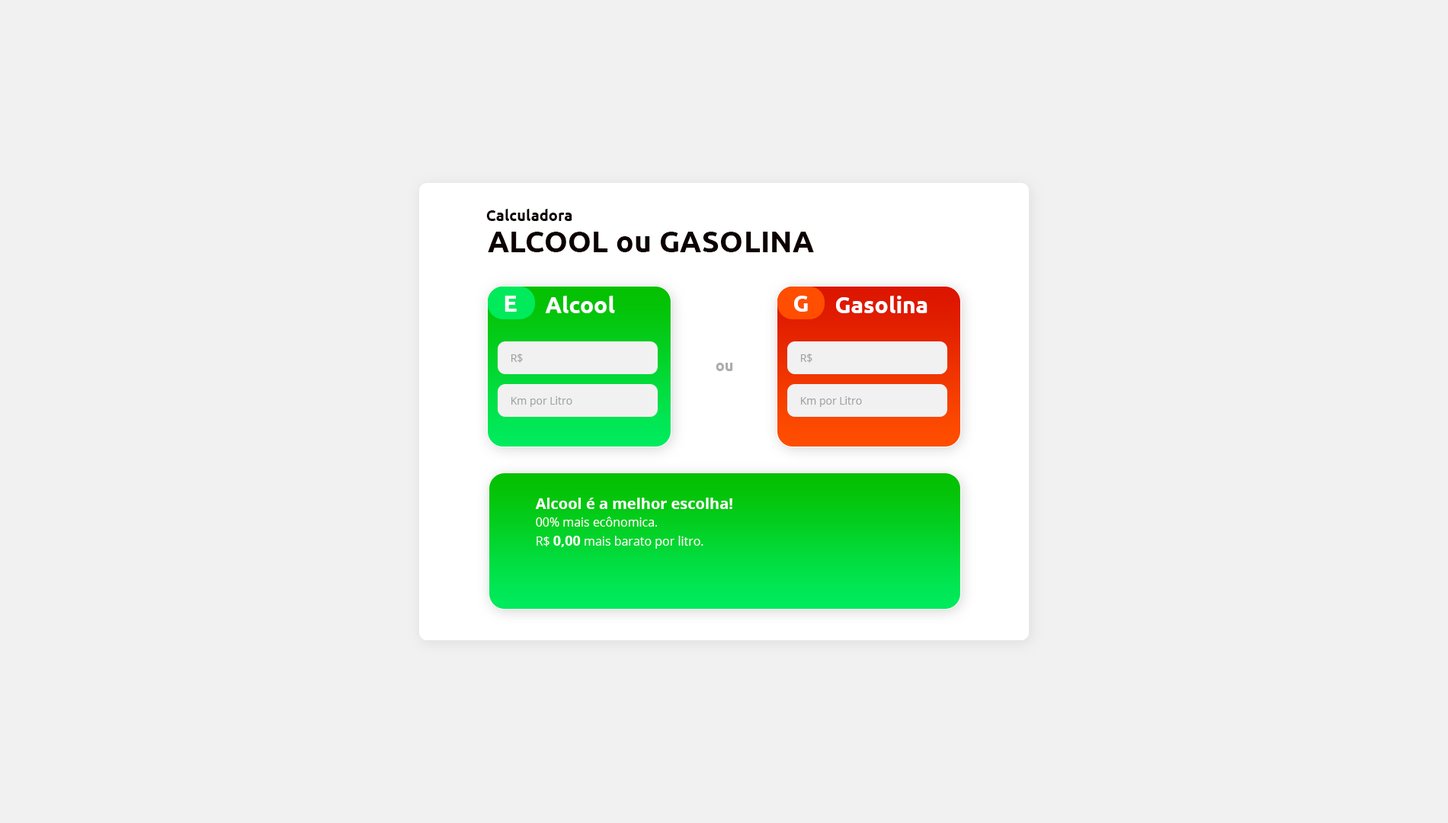
<style>
.page{position:relative;width:1448px;height:823px;background:#f1f1f1}
.page>*{position:absolute;margin:0}
.t1{font:15.3px "Ubuntu-Bold";color:#0d0000}
.t2{font:30.1px "Ubuntu-Bold";color:#0d0000}
.t3{font:22.9px "Ubuntu-Bold";color:#ffffff}
.t4{font:10.7px "OpenSans";color:#a2a2a2}
.t5{font:15.3px "Ubuntu-Bold";color:#adadad}
.t6{font:15.2px "OpenSans-Bold";color:#ffffff}
.t7{font:12.2px "OpenSans";color:#ffffff}
.t8{font:13.7px "OpenSans-Bold";color:#ffffff}
</style>
<div class="page">
<p class="t1" style="left:486px;top:209px;width:86px;height:12px">Calculadora</p>
<p class="t2" style="left:488px;top:232px;width:326px;height:20px">ALCOOL ou GASOLINA</p>
<p class="t3" style="left:505px;top:296px;width:12px;height:16px">E</p>
<p class="t3" style="left:545px;top:296px;width:70px;height:17px">Alcool</p>
<p class="t3" style="left:794px;top:296px;width:14px;height:16px">G</p>
<p class="t3" style="left:836px;top:296px;width:92px;height:17px">Gasolina</p>
<p class="t4" style="left:512px;top:354px;width:11px;height:9px">R$</p>
<p class="t4" style="left:801px;top:354px;width:12px;height:9px">R$</p>
<p class="t5" style="left:716px;top:363px;width:17px;height:8px">ou</p>
<p class="t4" style="left:512px;top:396px;width:60px;height:11px">Km por Litro</p>
<p class="t4" style="left:801px;top:396px;width:61px;height:11px">Km por Litro</p>
<p class="t6" style="left:535px;top:498px;width:198px;height:11px">Alcool é a melhor escolha!</p>
<p class="t7" style="left:536px;top:517px;width:121px;height:10px">00% mais ecônomica.</p>
<p class="t7" style="left:537px;top:536px;width:167px;height:13px">R$ <span class="t8">0,00</span> mais barato por litro.</p>
</div>
